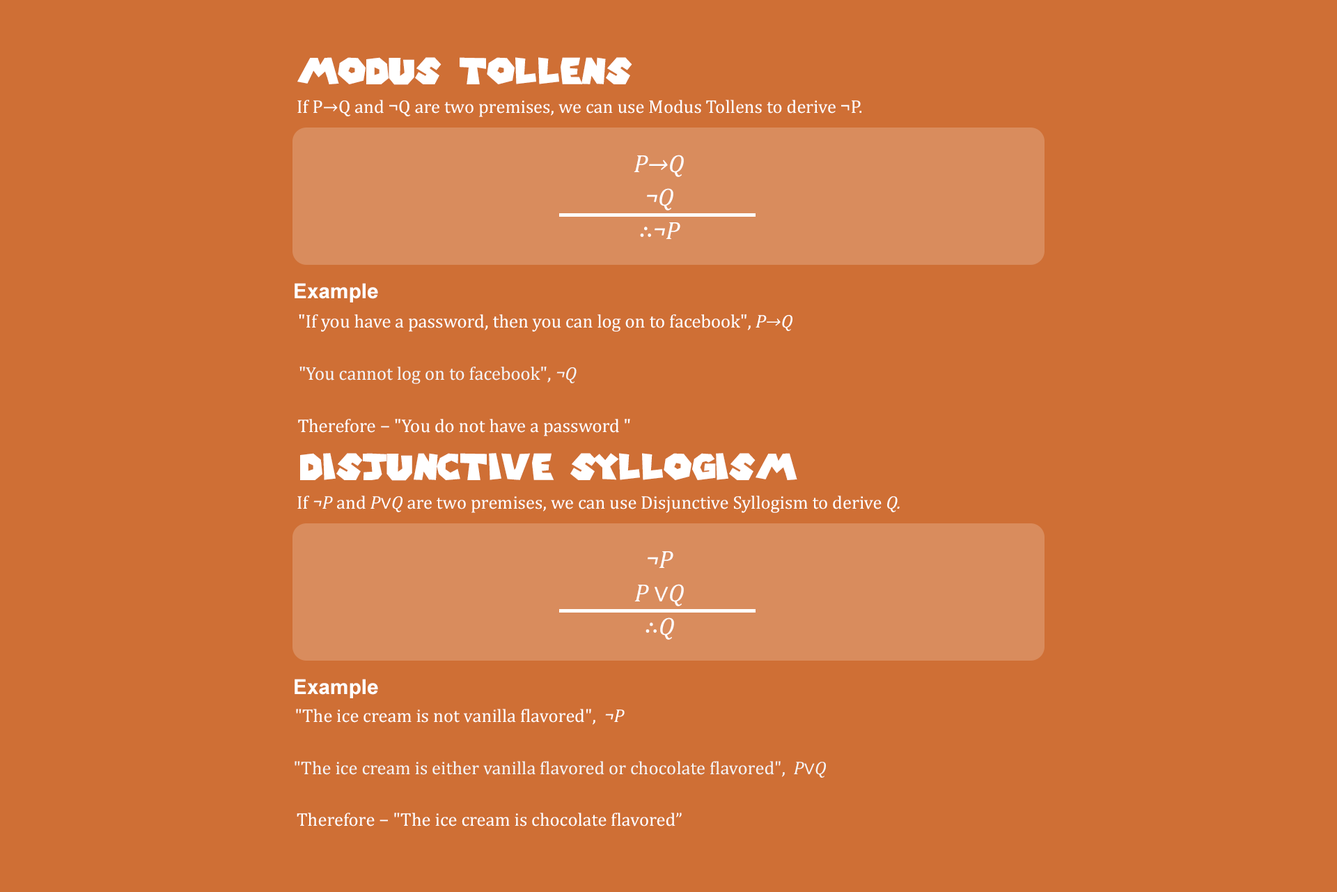
<style>
.page{position:relative;width:1337px;height:892px;background:#cf6f35}
.page>*{position:absolute;margin:0}
.t1{font:35.9px "SuperMarioGalaxy";color:#ffffff}
.t2{font:18.5px "Cambria";color:#ffffff}
.t3{font:25.1px/33.4px "Cambria-Italic";color:#ffffff}
.t4{font:25.1px/33.4px "Cambria";color:#ffffff}
.t5{font:20.8px "Arial-BoldMT";color:#ffffff}
.t6{font:18.6px "Cambria";color:#ffffff}
.t7{font:18.6px "Cambria-Italic";color:#ffffff}
.t8{font:18.6px "Cambria";color:#f5f5f5}
.t9{font:18.6px "Cambria-Italic";color:#f5f5f5}
.t10{font:18.5px "Cambria-Italic";color:#ffffff}
.t11{font:18.5px "Cambria";color:#f5f5f5}
.t12{font:18.5px "Cambria-Italic";color:#f5f5f5}
</style>
<div class="page">
<p class="t1" style="left:297px;top:57px;width:335px;height:28px">Modus Tollens</p>
<p class="t2" style="left:297px;top:100px;width:565px;height:17px">If P→Q and ¬Q are two premises, we can use Modus Tollens to derive ¬P.</p>
<p class="t3" style="left:634px;top:155px;width:50px;height:84px;text-align:center">P→Q<br>¬Q<br><span class="t4">∴</span>¬P</p>
<p class="t5" style="left:295px;top:283px;width:83px;height:19px">Example</p>
<p class="t6" style="left:299px;top:314px;width:494px;height:18px">"If you have a password, then you can log on to facebook", <span class="t7">P→Q</span></p>
<p class="t8" style="left:300px;top:366px;width:277px;height:18px">"You cannot log on to facebook", <span class="t9">¬Q</span></p>
<p class="t6" style="left:298px;top:419px;width:332px;height:17px">Therefore − "You do not have a password "</p>
<p class="t1" style="left:300px;top:453px;width:498px;height:28px">Disjunctive Syllogism</p>
<p class="t2" style="left:297px;top:495px;width:603px;height:18px">If <span class="t10">¬P</span> and <span class="t10">P</span>∨<span class="t10">Q</span> are two premises, we can use Disjunctive Syllogism to derive <span class="t10">Q.</span></p>
<p class="t3" style="left:635px;top:551px;width:49px;height:88px;text-align:center">¬P<br>P <span class="t4">∨</span>Q<br><span class="t4">∴</span>Q</p>
<p class="t5" style="left:295px;top:678px;width:83px;height:20px">Example</p>
<p class="t2" style="left:296px;top:708px;width:329px;height:16px">"The ice cream is not vanilla flavored",  <span class="t10">¬P</span></p>
<p class="t11" style="left:295px;top:761px;width:531px;height:16px">"The ice cream is either vanilla flavored or chocolate flavored",  <span class="t12">P</span>∨<span class="t12">Q</span></p>
<p class="t2" style="left:297px;top:812px;width:385px;height:14px">Therefore − "The ice cream is chocolate flavored”</p>
</div>
